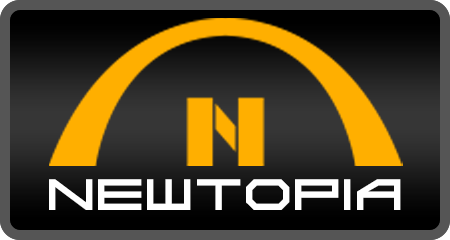
<style>
.page{position:relative;width:450px;height:240px}
.page>*{position:absolute;margin:0}
.t1{font:49.1px "AbsoluteZero";color:#ffffff}
</style>
<div class="page">
<p class="t1" style="left:49px;top:179px;width:352px;height:31px">NEWTOPIA</p>
</div>
